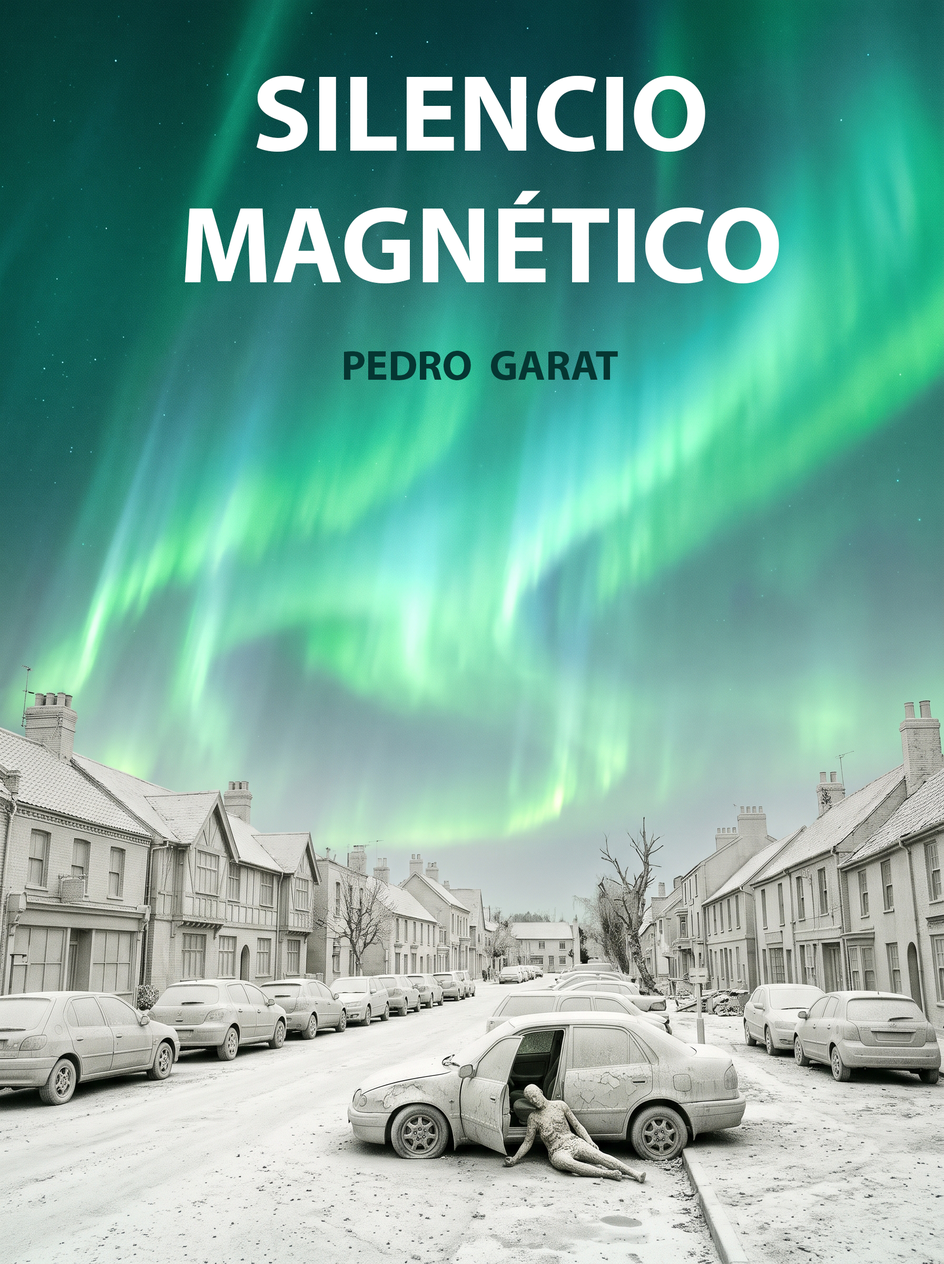
<style>
.page{position:relative;width:944px;height:1264px}
.page>*{position:absolute;margin:0}
.t1{font:109.7px "MyriadPro-Bold";color:#ffffff}
.t2{font:42.1px "MyriadPro-Bold";color:#053632}
</style>
<div class="page">
<p class="t1" style="left:185px;top:75px;width:594px;height:208px;text-align:center">SILENCIO<br>MAGNÉTICO</p>
<p class="t2" style="left:344px;top:351px;width:274px;height:29px">PEDRO  GARAT</p>
</div>
